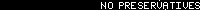
<style>
.page{position:relative;width:200px;height:10px;background:#000000}
.page>*{position:absolute;margin:0}
.t1{font:8px "Fixedv01";letter-spacing:0.05em;color:#ffffff}
</style>
<div class="page">
<p class="t1" style="left:101px;top:2px;width:99px;height:7px">NO PRESERVATIVES</p>
</div>
